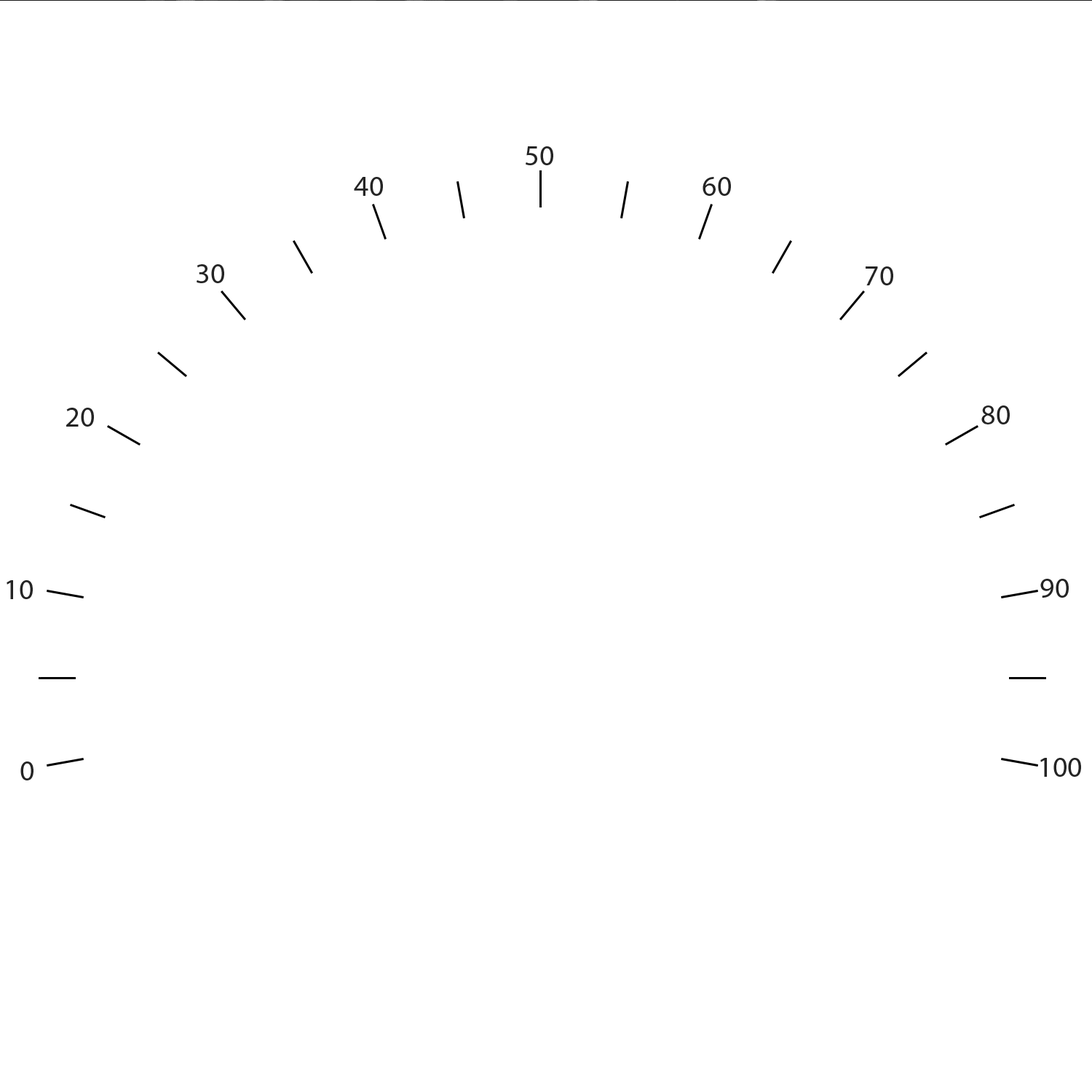
<style>
.page{position:relative;width:1092px;height:1092px;background:#ffffff}
.page>*{position:absolute;margin:0}
.t1{font:29.1px "MyriadPro-Regular";color:#242424}
</style>
<div class="page">
<p class="t1" style="left:526px;top:146px;width:27px;height:19px">50</p>
<p class="t1" style="left:354px;top:176px;width:29px;height:19px">40</p>
<p class="t1" style="left:703px;top:176px;width:28px;height:19px">60</p>
<p class="t1" style="left:197px;top:264px;width:27px;height:18px">30</p>
<p class="t1" style="left:866px;top:266px;width:27px;height:19px">70</p>
<p class="t1" style="left:66px;top:407px;width:28px;height:19px">20</p>
<p class="t1" style="left:981px;top:405px;width:29px;height:19px">80</p>
<p class="t1" style="left:7px;top:579px;width:26px;height:19px">10</p>
<p class="t1" style="left:1040px;top:578px;width:29px;height:19px">90</p>
<p class="t1" style="left:20px;top:761px;width:13px;height:19px">0</p>
<p class="t1" style="left:1040px;top:757px;width:41px;height:19px">100</p>
</div>
